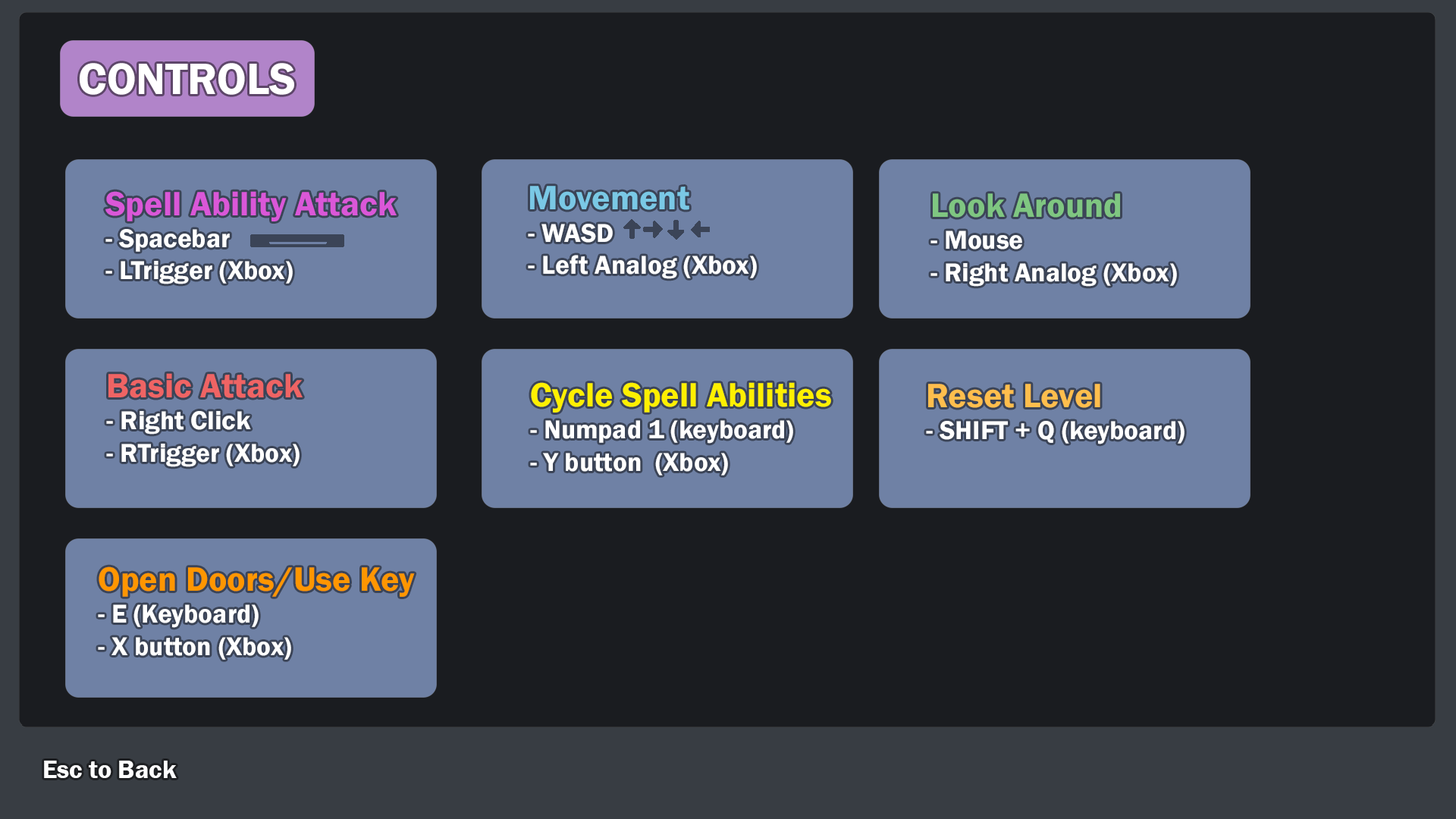
<style>
.page{position:relative;width:1456px;height:819px;background:#1a1c20}
.page>*{position:absolute;margin:0}
.t1{font:45.6px "FranklinGothic-Demi";color:#ffffff}
.t2{font:26.8px "FranklinGothic-Demi";color:#ffffff}
.t3{font:34.9px "FranklinGothic-Demi";color:#7ac8e5}
.t4{font:34.9px "FranklinGothic-Demi";color:#da57d8}
.t5{font:34.9px "FranklinGothic-Demi";color:#7fc681}
.t6{font:34.9px "FranklinGothic-Demi";color:#ef6464}
.t7{font:34.9px "FranklinGothic-Demi";color:#fff000}
.t8{font:34.9px "FranklinGothic-Demi";color:#ffbe4d}
.t9{font:34.9px "FranklinGothic-Demi";color:#ff9600}
.t10{font:25.8px "FranklinGothic-Demi";color:#ffffff}
</style>
<div class="page">
<p class="t1" style="left:80px;top:63px;width:214px;height:32px">CONTROLS</p>
<p class="t2" style="left:528px;top:186px;width:229px;height:93px"><span class="t3">Movement<br></span>- WASD<br>- Left Analog (Xbox)</p>
<p class="t2" style="left:105px;top:191px;width:292px;height:93px"><span class="t4">Spell Ability Attack<br></span>- Spacebar<br>- LTrigger (Xbox)</p>
<p class="t2" style="left:930px;top:193px;width:247px;height:94px"><span class="t5">Look Around<br></span>- Mouse<br>- Right Analog (Xbox)</p>
<p class="t2" style="left:106px;top:373px;width:197px;height:94px"><span class="t6">Basic Attack<br></span>- Right Click<br>- RTrigger (Xbox)</p>
<p class="t2" style="left:530px;top:382px;width:301px;height:93px"><span class="t7">Cycle Spell Abilities<br></span>- Numpad 1 (keyboard)<br>- Y button  (Xbox)</p>
<p class="t2" style="left:926px;top:384px;width:259px;height:60px"><span class="t8">Reset Level<br></span>- SHIFT + Q (keyboard)</p>
<p class="t2" style="left:98px;top:566px;width:317px;height:94px"><span class="t9">Open Doors/Use Key<br></span>- E (Keyboard)<br>- X button (Xbox)</p>
<p class="t10" style="left:44px;top:761px;width:133px;height:17px">Esc to Back</p>
</div>
